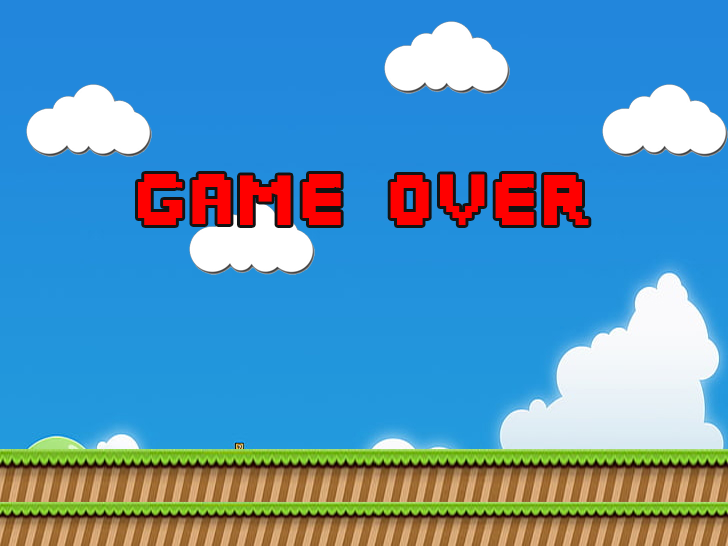
<style>
.page{position:relative;width:728px;height:546px}
.page>*{position:absolute;margin:0}
.t1{font:72px "pixellet-Bold";color:#ff0000}
</style>
<div class="page">
<p class="t1" style="left:138px;top:174px;width:451px;height:51px">Game Over</p>
</div>
